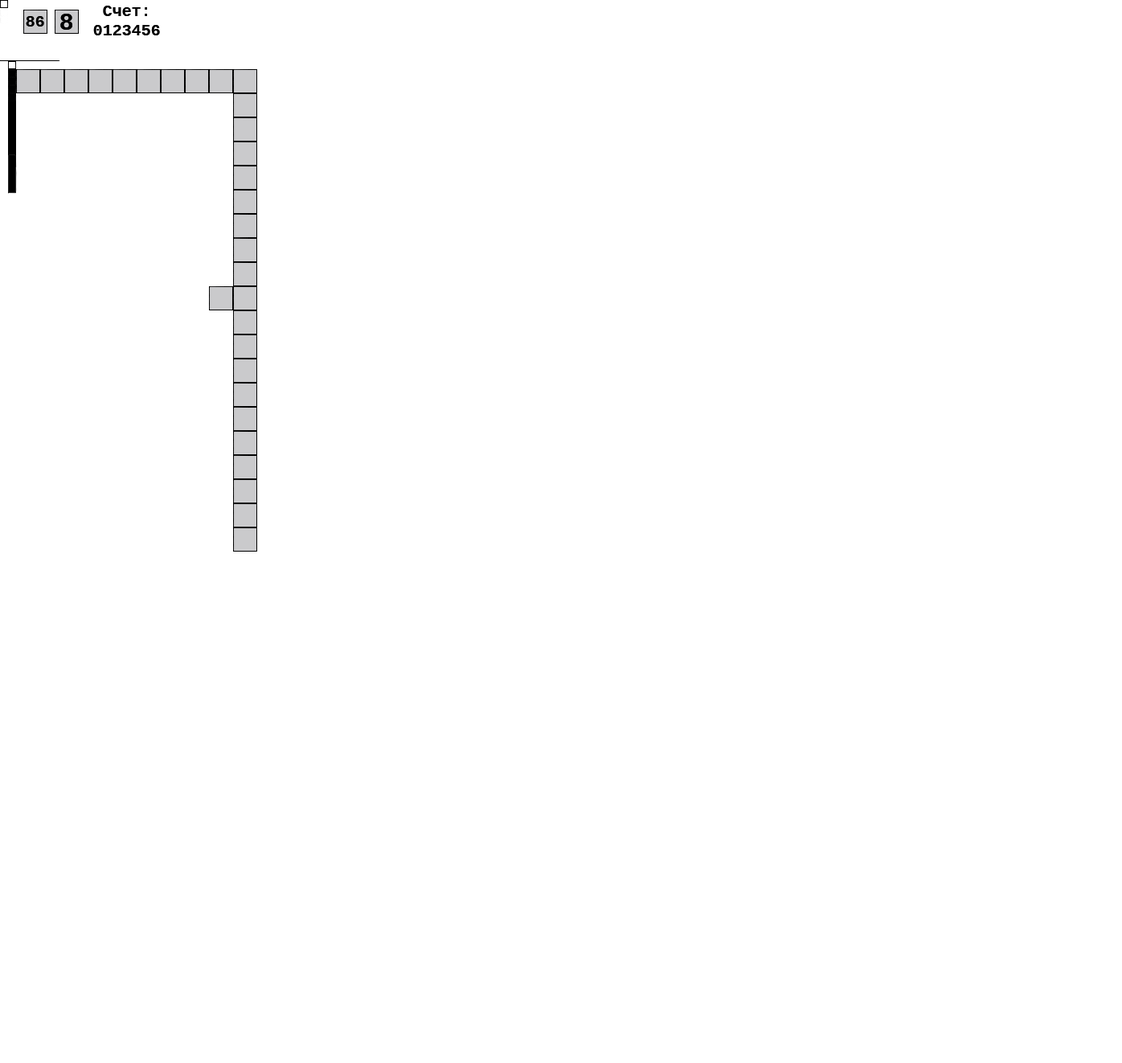
<style>
.page{position:relative;width:1122px;height:1063px;background:#ffffff}
.page>*{position:absolute;margin:0}
.t1{font:16.1px "Cousine-Bold";color:#000000}
.t2{font:24.1px "Cousine-Bold";color:#000000}
</style>
<div class="page">
<p class="t1" style="left:93px;top:6px;width:67px;height:29px;text-align:center">Счет:<br>0123456</p>
<p class="t1" style="left:26px;top:16px;width:18px;height:11px">86</p>
<p class="t2" style="left:60px;top:14px;width:12px;height:16px">8</p>
</div>
